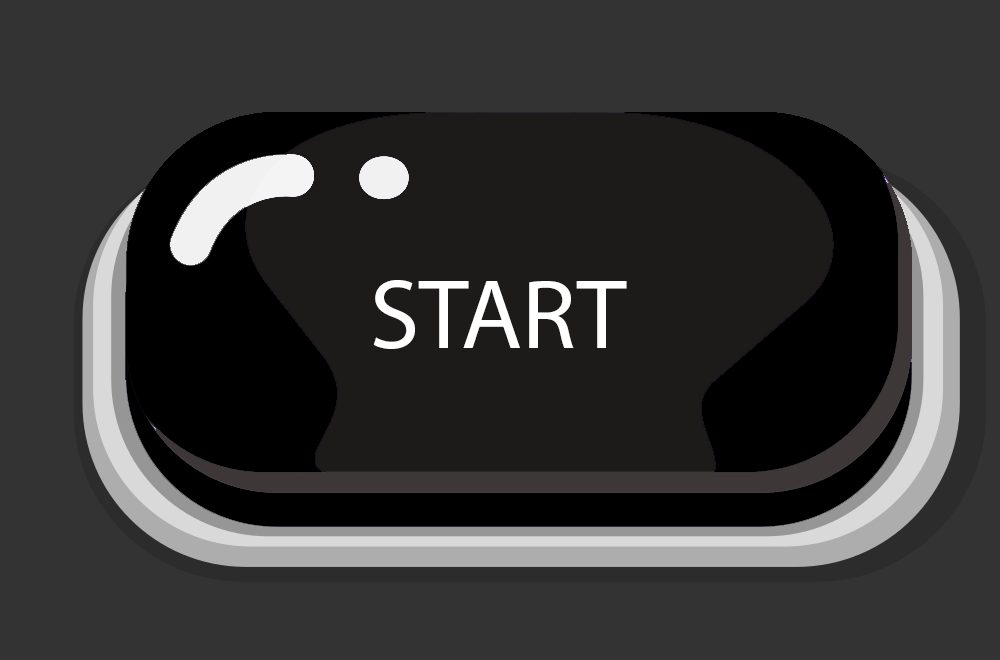
<style>
.page{position:relative;width:1000px;height:660px;background:#333333}
.page>*{position:absolute;margin:0}
.t1{font:100px "MyriadPro-Regular";color:#ffffff}
</style>
<div class="page">
<p class="t1" style="left:373px;top:280px;width:254px;height:69px">START</p>
</div>
